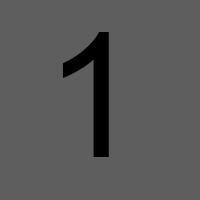
<style>
.page{position:relative;width:200px;height:200px;background:#5e5e5e}
.page>*{position:absolute;margin:0}
.t1{font:174.2px "ArialMT";color:#000000}
</style>
<div class="page">
<p class="t1" style="left:62px;top:32px;width:47px;height:125px">1</p>
</div>
